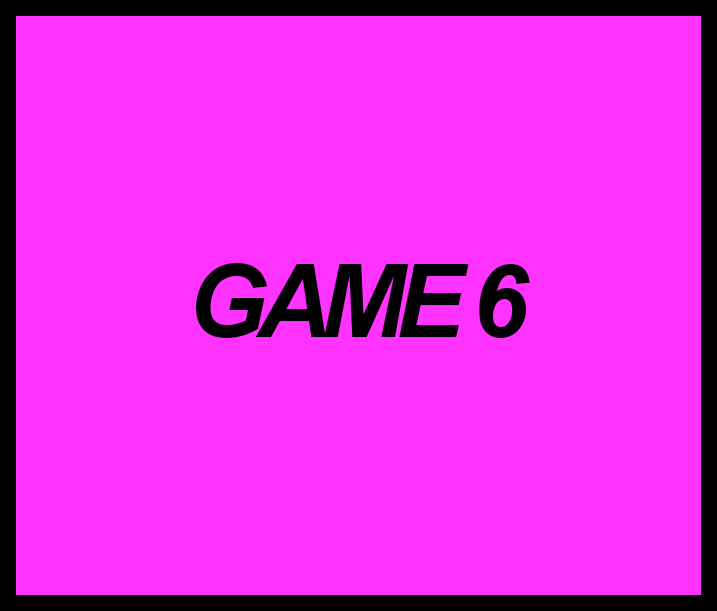
<style>
.page{position:relative;width:717px;height:611px;background:#ff33ff}
.page>*{position:absolute;margin:0}
.t1{font:102px "Arial-BoldItalicMT";letter-spacing:-0.1em;color:#000000}
</style>
<div class="page">
<p class="t1" style="left:196px;top:263px;width:334px;height:75px">GAME 6</p>
</div>
